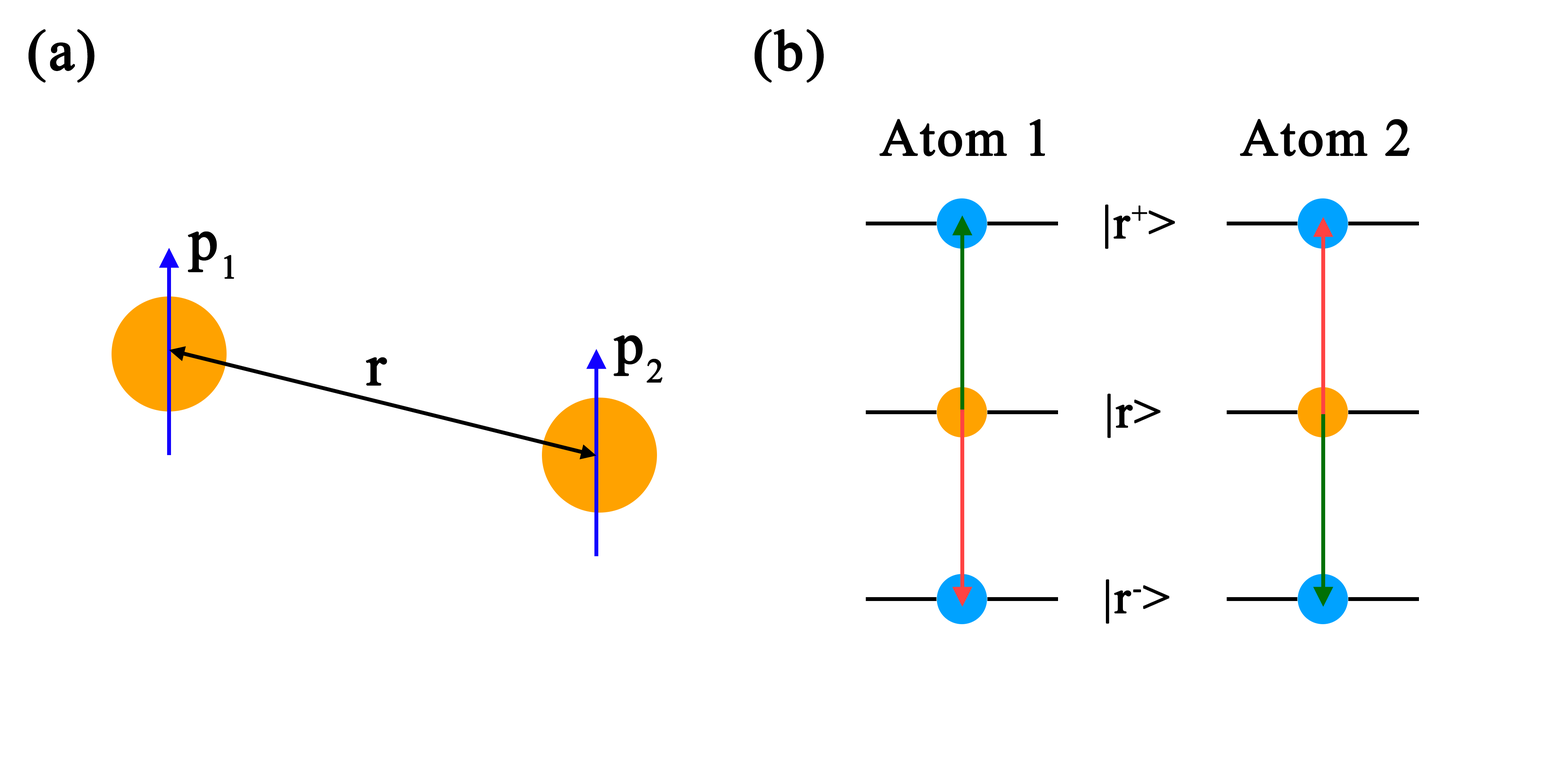
<style>
.page{position:relative;width:1544px;height:772px;background:#ffffff}
.page>*{position:absolute;margin:0}
.t1{font:57.4px "TimesNewRomanPSMT";letter-spacing:0.02em;color:#000000;font-weight:bold}
.t2{font:52.3px "TimesNewRomanPSMT";letter-spacing:0.02em;color:#000000;font-weight:bold}
.t3{font:47.2px "TimesNewRomanPSMT";letter-spacing:0.02em;color:#000000;font-weight:bold}
.t4{font:58.1px "TimesNewRomanPSMT";letter-spacing:0.02em;color:#000000;font-weight:bold}
</style>
<div class="page">
<p class="t1" style="left:28px;top:29px;width:67px;height:54px">(a)</p>
<p class="t1" style="left:754px;top:29px;width:70px;height:54px">(b)</p>
<p class="t2" style="left:879px;top:119px;width:166px;height:38px">Atom 1</p>
<p class="t2" style="left:1240px;top:119px;width:170px;height:38px">Atom 2</p>
<p class="t3" style="left:1105px;top:204px;width:70px;height:45px">|r+&gt;</p>
<p class="t4" style="left:188px;top:231px;width:46px;height:48px">p1</p>
<p class="t4" style="left:613px;top:335px;width:50px;height:48px">p2</p>
<p class="t4" style="left:366px;top:357px;width:21px;height:29px">r</p>
<p class="t3" style="left:1108px;top:393px;width:53px;height:45px">|r&gt;</p>
<p class="t3" style="left:1106px;top:579px;width:64px;height:45px">|r-&gt;</p>
</div>
